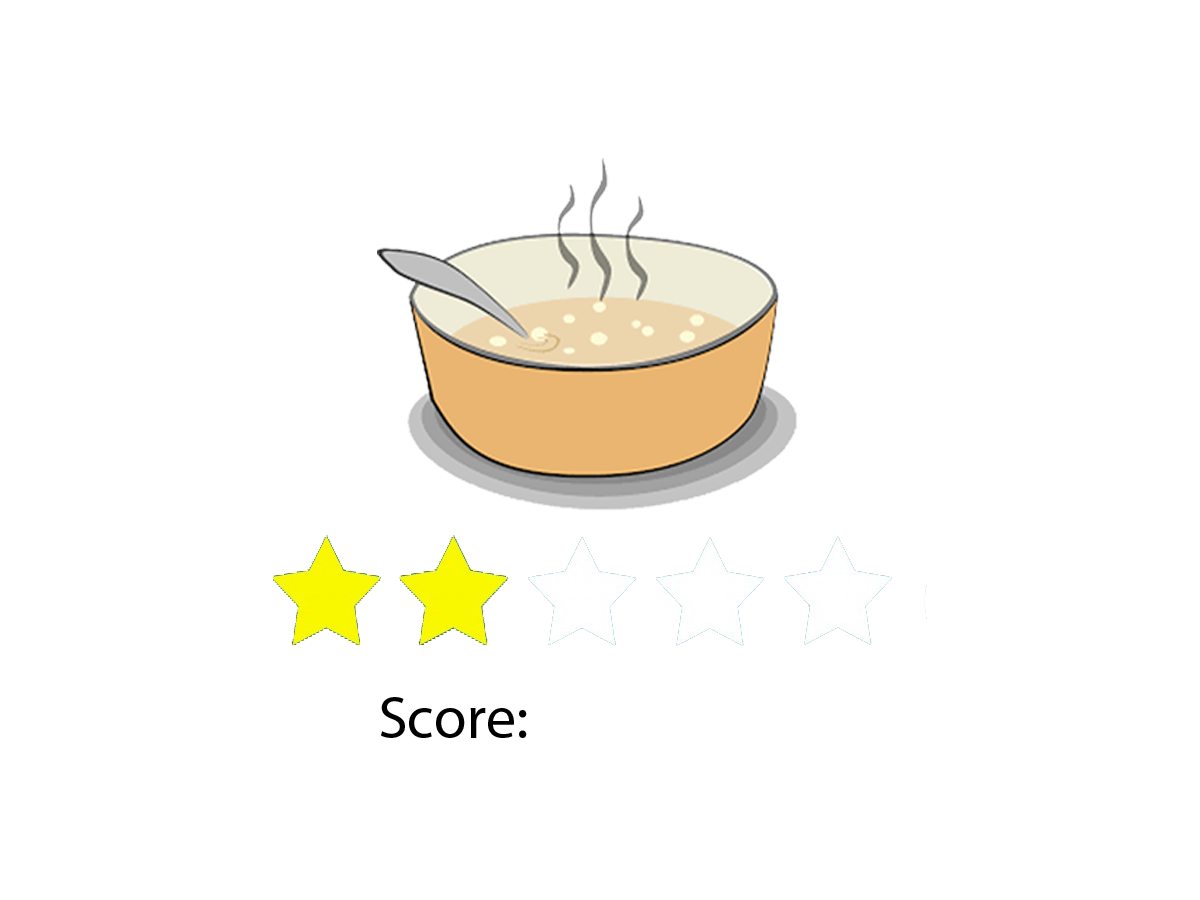
<style>
.page{position:relative;width:1200px;height:900px;background:#ffffff}
.page>*{position:absolute;margin:0}
.t1{font:60px "MyriadPro-Regular";color:#000000}
</style>
<div class="page">
<p class="t1" style="left:381px;top:697px;width:146px;height:41px">Score:</p>
</div>
